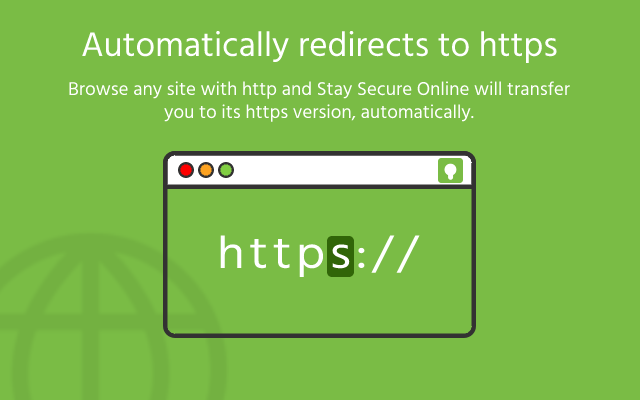
<style>
.page{position:relative;width:640px;height:400px;background:#7abc45}
.page>*{position:absolute;margin:0}
.t1{font:35px "Hind-Regular";color:#ffffff}
.t2{font:19px "Hind-Regular";color:#ffffff}
.t3{font:46px "Hind-Regular";letter-spacing:0.096em;color:#ffffff;scale:1.12 1}
</style>
<div class="page">
<p class="t1" style="left:82px;top:30px;width:475px;height:33px">Automatically redirects to https</p>
<p class="t2" style="left:69px;top:81px;width:501px;height:41px;text-align:center">Browse any site with http and Stay Secure Online will transfer<br>you to its https version, automatically.</p>
<p class="t3" style="left:220px;top:235px;width:200px;height:43px">https://</p>
</div>
